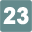
<style>
.page{position:relative;width:32px;height:32px;background:#648a8c}
.page>*{position:absolute;margin:0}
.t1{font:22.5px "Arial-BoldMT";color:#ffffff;font-weight:bold}
</style>
<div class="page">
<p class="t1" style="left:3px;top:7px;width:26px;height:18px">23</p>
</div>
